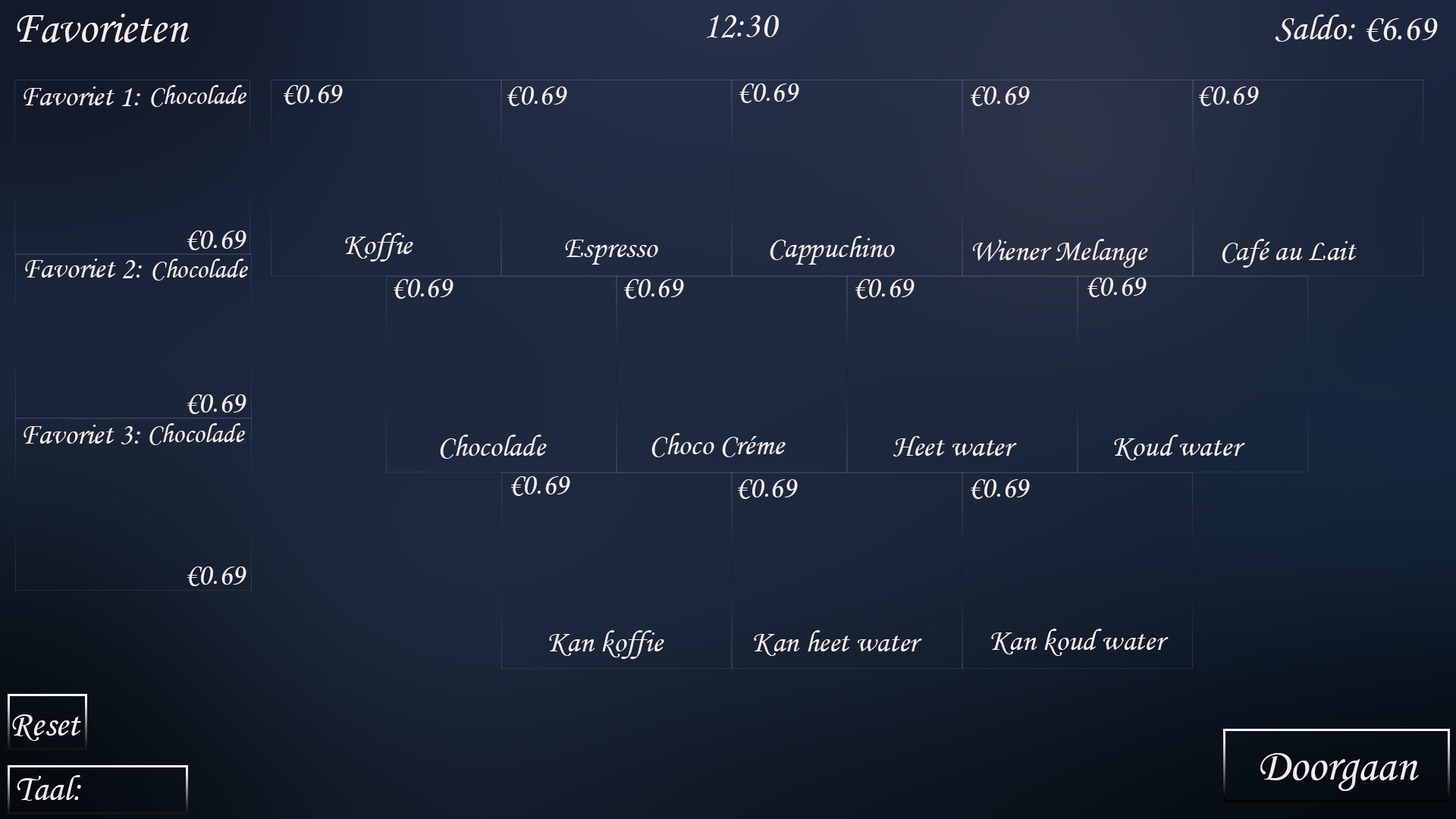
<style>
.page{position:relative;width:1456px;height:819px}
.page>*{position:absolute;margin:0}
.t1{font:45.5px "MonotypeCorsiva";color:#f5ecec}
.t2{font:36.4px "MonotypeCorsiva";color:#f5ecec}
.t3{font:30.3px "MonotypeCorsiva";color:#f5ecec}
.t4{font:27.3px "MonotypeCorsiva";color:#f5ecec}
</style>
<div class="page">
<p class="t1" style="left:17px;top:14px;width:173px;height:28px">Favorieten</p>
<p class="t2" style="left:707px;top:14px;width:72px;height:24px">12:30</p>
<p class="t2" style="left:1275px;top:14px;width:163px;height:28px">Saldo: €6.69</p>
<p class="t3" style="left:24px;top:86px;width:116px;height:20px">Favoriet 1:</p>
<p class="t4" style="left:151px;top:85px;width:95px;height:22px">Chocolade</p>
<p class="t3" style="left:284px;top:85px;width:59px;height:20px">€0.69</p>
<p class="t3" style="left:507px;top:86px;width:60px;height:20px">€0.69</p>
<p class="t3" style="left:739px;top:83px;width:60px;height:20px">€0.69</p>
<p class="t3" style="left:971px;top:86px;width:59px;height:20px">€0.69</p>
<p class="t3" style="left:1199px;top:86px;width:60px;height:20px">€0.69</p>
<p class="t3" style="left:187px;top:231px;width:59px;height:19px">€0.69</p>
<p class="t3" style="left:345px;top:233px;width:68px;height:29px">Koffie</p>
<p class="t3" style="left:565px;top:240px;width:93px;height:25px">Espresso</p>
<p class="t3" style="left:770px;top:236px;width:125px;height:29px">Cappuchino</p>
<p class="t3" style="left:972px;top:239px;width:176px;height:29px">Wiener Melange</p>
<p class="t3" style="left:1222px;top:239px;width:135px;height:29px">Café au Lait</p>
<p class="t3" style="left:25px;top:259px;width:117px;height:19px">Favoriet 2:</p>
<p class="t4" style="left:152px;top:259px;width:96px;height:22px">Chocolade</p>
<p class="t3" style="left:394px;top:279px;width:59px;height:20px">€0.69</p>
<p class="t3" style="left:624px;top:279px;width:60px;height:20px">€0.69</p>
<p class="t3" style="left:855px;top:279px;width:60px;height:20px">€0.69</p>
<p class="t3" style="left:1087px;top:278px;width:60px;height:19px">€0.69</p>
<p class="t3" style="left:187px;top:394px;width:59px;height:20px">€0.69</p>
<p class="t3" style="left:24px;top:425px;width:116px;height:19px">Favoriet 3:</p>
<p class="t4" style="left:149px;top:423px;width:96px;height:22px">Chocolade</p>
<p class="t3" style="left:440px;top:435px;width:107px;height:24px">Chocolade</p>
<p class="t3" style="left:651px;top:433px;width:135px;height:24px">Choco Créme</p>
<p class="t3" style="left:893px;top:436px;width:124px;height:21px">Heet water</p>
<p class="t3" style="left:1114px;top:435px;width:131px;height:25px">Koud water</p>
<p class="t3" style="left:511px;top:476px;width:59px;height:20px">€0.69</p>
<p class="t3" style="left:738px;top:479px;width:60px;height:20px">€0.69</p>
<p class="t3" style="left:971px;top:479px;width:59px;height:20px">€0.69</p>
<p class="t3" style="left:187px;top:566px;width:59px;height:20px">€0.69</p>
<p class="t3" style="left:991px;top:629px;width:178px;height:27px">Kan koud water</p>
<p class="t3" style="left:549px;top:630px;width:115px;height:29px">Kan koffie</p>
<p class="t3" style="left:754px;top:630px;width:168px;height:26px">Kan heet water</p>
<p class="t2" style="left:12px;top:714px;width:69px;height:27px">Reset</p>
<p class="t1" style="left:1260px;top:753px;width:159px;height:38px">Doorgaan</p>
<p class="t2" style="left:17px;top:775px;width:64px;height:26px">Taal:</p>
</div>
